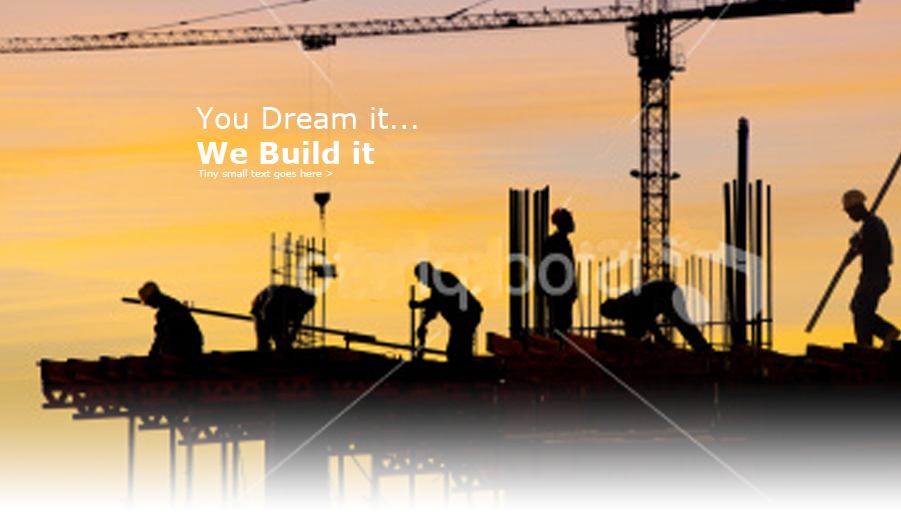
<style>
.page{position:relative;width:901px;height:512px}
.page>*{position:absolute;margin:0}
.t1{font:29.2px "Verdana";color:#ffffff}
.t2{font:29.2px "Verdana-Bold";color:#ffffff}
.t3{font:9.7px "Verdana";color:#ffffff}
</style>
<div class="page">
<p class="t1" style="left:196px;top:107px;width:221px;height:57px">You Dream it...<br><span class="t2">We Build it</span></p>
<p class="t3" style="left:197px;top:169px;width:136px;height:10px">Tiny small text goes here &gt;</p>
</div>
